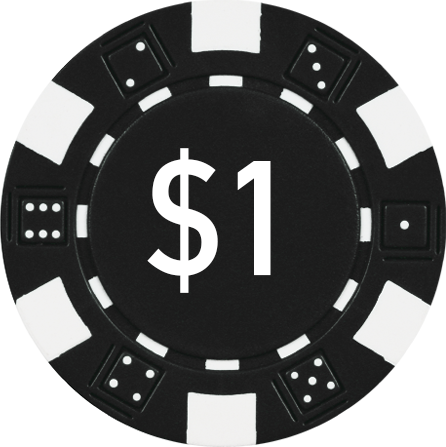
<style>
.page{position:relative;width:446px;height:447px;background:#ffffff}
.page>*{position:absolute;margin:0}
.t1{font:160px "DINAlternate-Bold";color:#ffffff}
</style>
<div class="page">
<p class="t1" style="left:147px;top:148px;width:124px;height:145px">$1</p>
</div>
